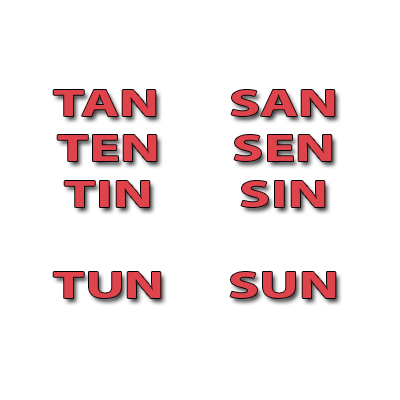
<style>
.page{position:relative;width:400px;height:400px;background:#ffffff}
.page>*{position:absolute;margin:0}
.t1{font:37.9px "MyriadPro-Bold";color:#df444c;scale:1.54 1}
</style>
<div class="page">
<p class="t1" style="left:53px;top:90px;width:283px;height:208px;text-align:center">TAN   SAN<br>TEN   SEN<br>TIN   SIN<br><br>TUN   SUN</p>
</div>
